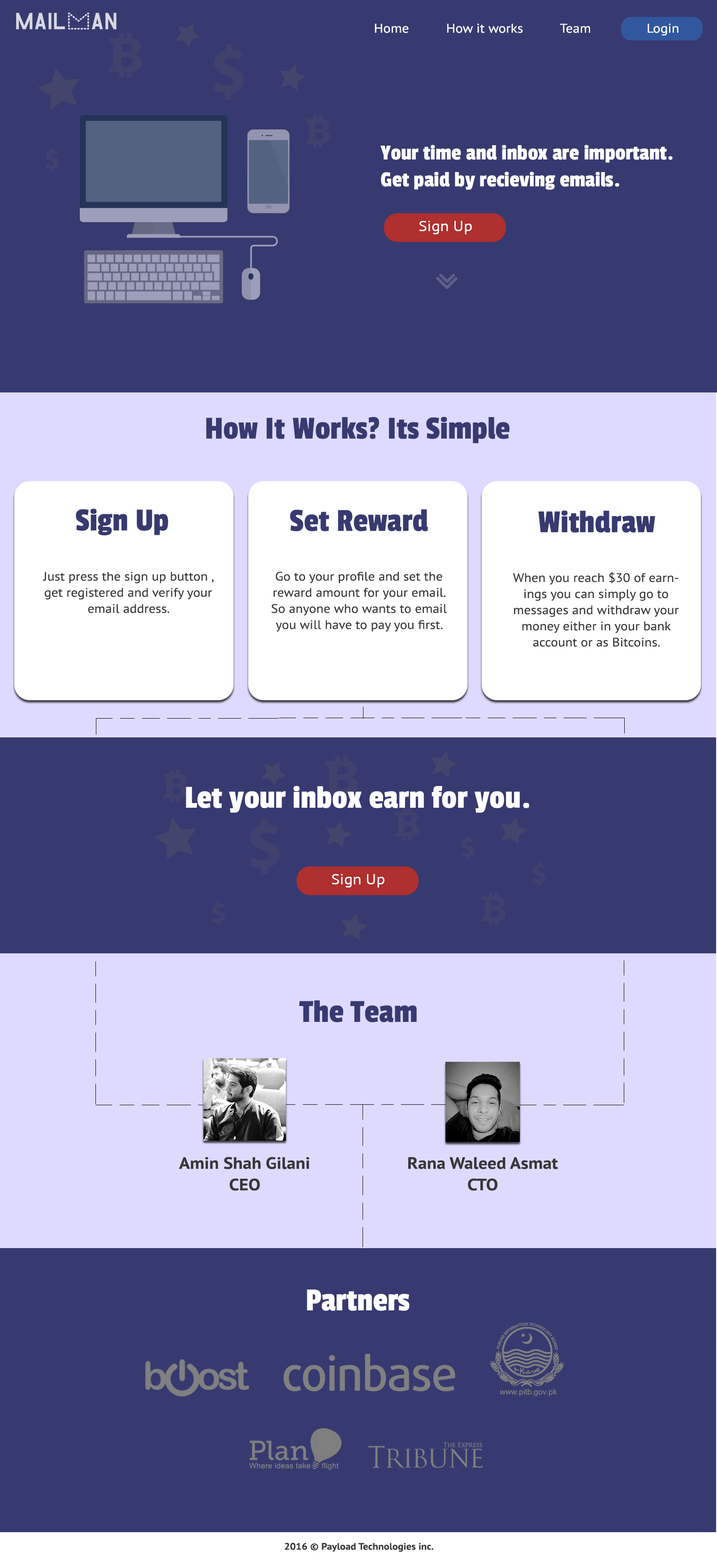
<style>
.page{position:relative;width:717px;height:1568px;background:#373a70}
.page>*{position:absolute;margin:0}
.t1{font:12.8px "PTSans-Regular";color:#ffffff;scale:1.09 1}
.t2{font:22.4px "PassionOne-Regular";color:#ffffff}
.t3{font:14.8px "PTSans-Regular";color:#ffffff;scale:1.09 1}
.t4{font:33.6px "PassionOne-Regular";color:#373a70}
.t5{font:12.4px "PTSans-Regular";color:#373737;scale:1.09 1}
.t6{font:33.6px "PassionOne-Regular";color:#ffffff}
.t7{font:16.5px "PTSans-Bold";color:#373737;scale:1.09 1}
.t8{font:9.5px "PTSans-Bold";color:#373737;scale:1.09 1}
</style>
<div class="page">
<p class="t1" style="left:375px;top:23px;width:303px;height:13px">Home          How it works          Team               Login</p>
<p class="t2" style="left:380px;top:145px;width:292px;height:45px">Your time and inbox are important.<br>Get paid by recieving emails.</p>
<p class="t3" style="left:419px;top:221px;width:53px;height:13px">Sign Up</p>
<p class="t4" style="left:206px;top:417px;width:303px;height:27px">How It Works? Its Simple</p>
<p class="t4" style="left:76px;top:508px;width:92px;height:27px">Sign Up</p>
<p class="t4" style="left:290px;top:509px;width:138px;height:22px">Set Reward</p>
<p class="t4" style="left:538px;top:510px;width:117px;height:23px">Withdraw</p>
<p class="t5" style="left:43px;top:572px;width:171px;height:41px;text-align:center">Just press the sign up button , get registered and verify your email address.</p>
<p class="t5" style="left:271px;top:572px;width:176px;height:60px;text-align:center">Go to your profile and set the reward amount for your email. So anyone who wants to email you will have to pay you first.</p>
<p class="t5" style="left:513px;top:572px;width:166px;height:75px;text-align:center">When you reach $30 of earnings you can simply go to   messages and withdraw your money either in your bank     account or as Bitcoins.</p>
<p class="t6" style="left:186px;top:786px;width:343px;height:27px">Let your inbox earn for you.</p>
<p class="t3" style="left:332px;top:874px;width:52px;height:13px">Sign Up</p>
<p class="t4" style="left:299px;top:1000px;width:118px;height:22px">The Team</p>
<p class="t7" style="left:179px;top:1157px;width:131px;height:34px;text-align:center">Amin Shah Gilani<br>CEO</p>
<p class="t7" style="left:408px;top:1157px;width:150px;height:34px;text-align:center">Rana Waleed Asmat<br>CTO</p>
<p class="t6" style="left:307px;top:1289px;width:102px;height:22px">Partners</p>
<p class="t8" style="left:284px;top:1542px;width:150px;height:10px">2016 © Payload Technologies inc.</p>
</div>
